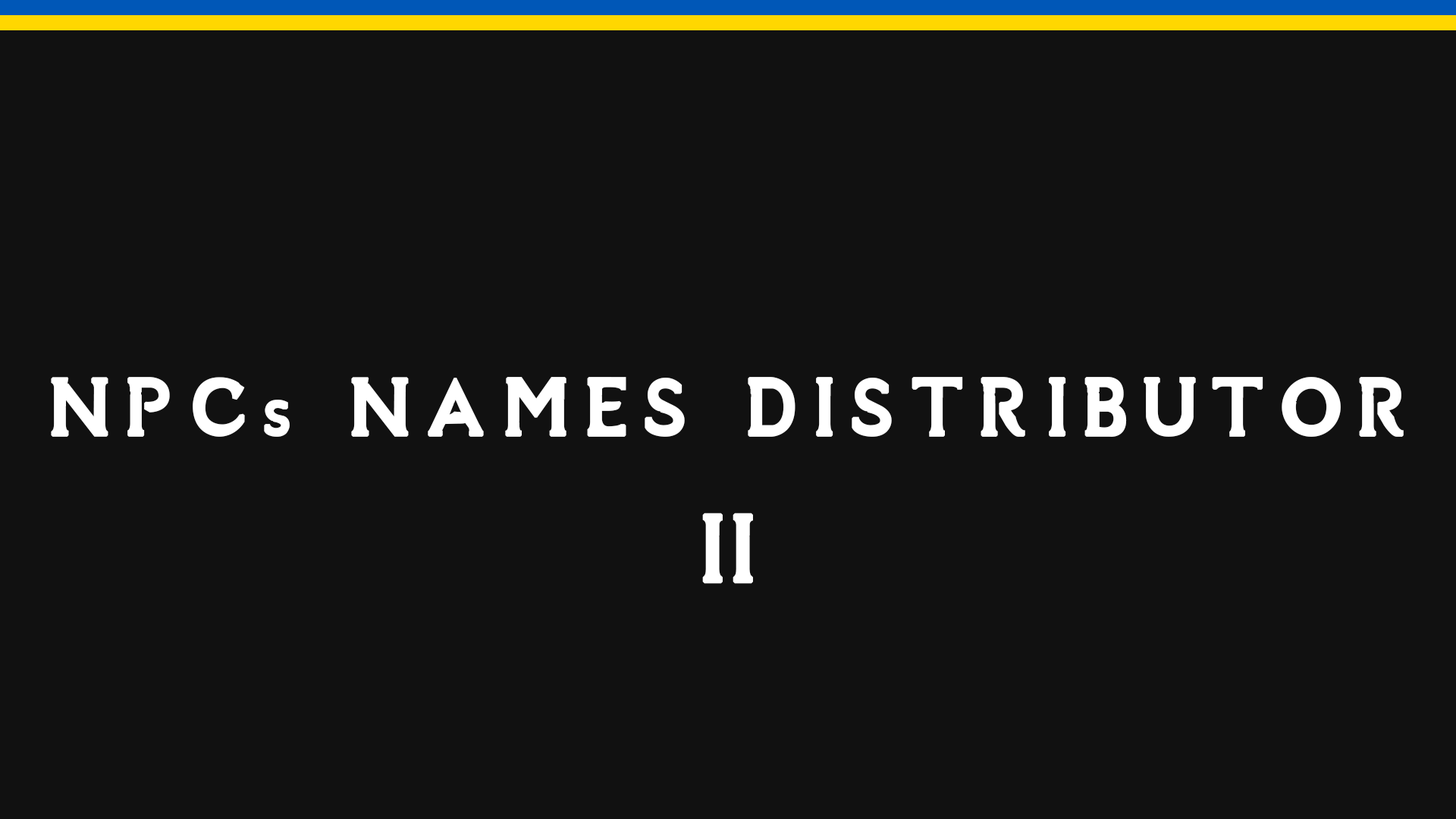
<style>
.page{position:relative;width:1456px;height:819px;background:#111111}
.page>*{position:absolute;margin:0}
.t1{font:102.4px "SovngardeLight";letter-spacing:0.14em;color:#ffffff;font-weight:bold}
.t2{font:121.3px "SovngardeLight";letter-spacing:0.04em;color:#ffffff;font-weight:bold}
</style>
<div class="page">
<p class="t1" style="left:51px;top:377px;width:1353px;height:60px">NPCs NAMES DISTRIBUTOR</p>
<p class="t2" style="left:702px;top:513px;width:51px;height:71px">II</p>
</div>
